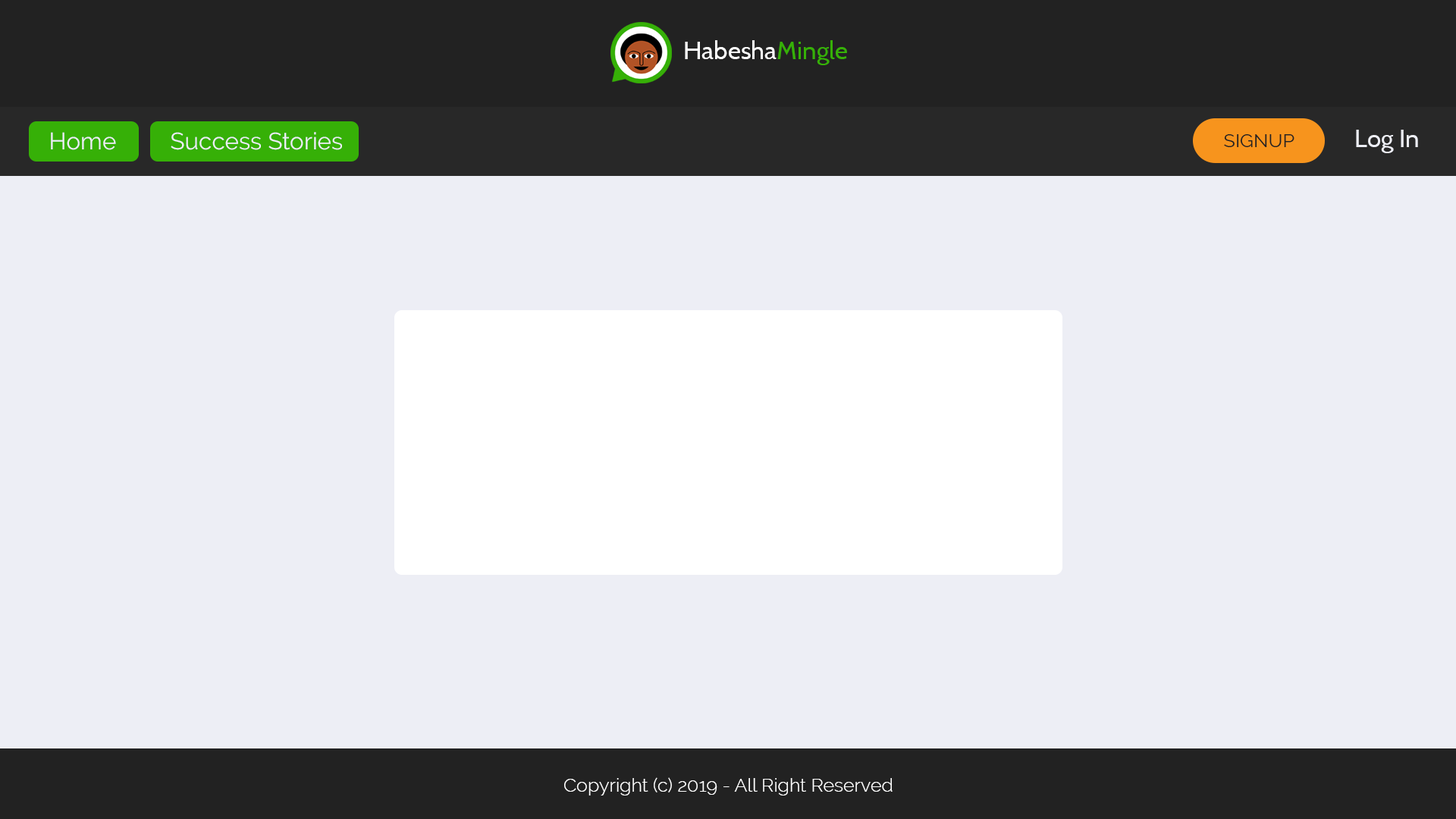
<style>
.page{position:relative;width:1456px;height:819px;background:#edeef5}
.page>*{position:absolute;margin:0}
.t1{font:25.3px "Cabin-Regular";color:#ffffff}
.t2{font:25.3px "Cabin-Regular";color:#36b007}
.t3{font:23.8px "Raleway-Regular";color:#edeef5}
.t4{font:19px "Raleway-Regular";color:#222222}
.t5{font:25.3px "Cabin-Regular";color:#edeef5}
.t6{font:19px "Raleway-Light";color:#ffffff}
</style>
<div class="page">
<p class="t1" style="left:685px;top:40px;width:162px;height:25px">Habesha<span class="t2">Mingle</span></p>
<p class="t3" style="left:51px;top:132px;width:65px;height:18px">Home</p>
<p class="t3" style="left:171px;top:132px;width:171px;height:18px">Success Stories</p>
<p class="t4" style="left:1224px;top:134px;width:70px;height:13px">SIGNUP</p>
<p class="t5" style="left:1356px;top:130px;width:62px;height:23px">Log In</p>
<p class="t6" style="left:564px;top:777px;width:329px;height:18px">Copyright (c) 2019 - All Right Reserved</p>
</div>
